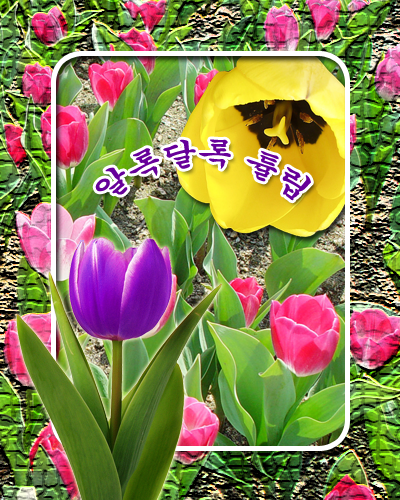
<style>
.page{position:relative;width:400px;height:500px}
.page>*{position:absolute;margin:0}
.t1{font:30px "Gungsuh";color:#660099}
</style>
<div class="page">
<p class="t1" style="left:95px;top:139px;width:216px;height:62px;text-align:center">알록달록 튤립</p>
</div>
